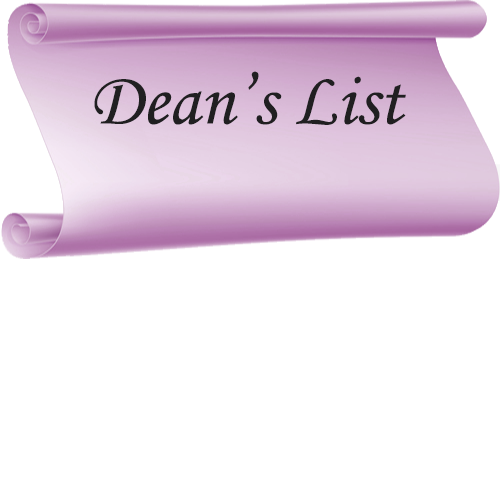
<style>
.page{position:relative;width:500px;height:492px;background:#ffffff}
.page>*{position:absolute;margin:0}
.t1{font:75.3px "MonotypeCorsiva";color:#221f1f}
</style>
<div class="page">
<p class="t1" style="left:94px;top:71px;width:312px;height:54px">Dean’s List</p>
</div>
